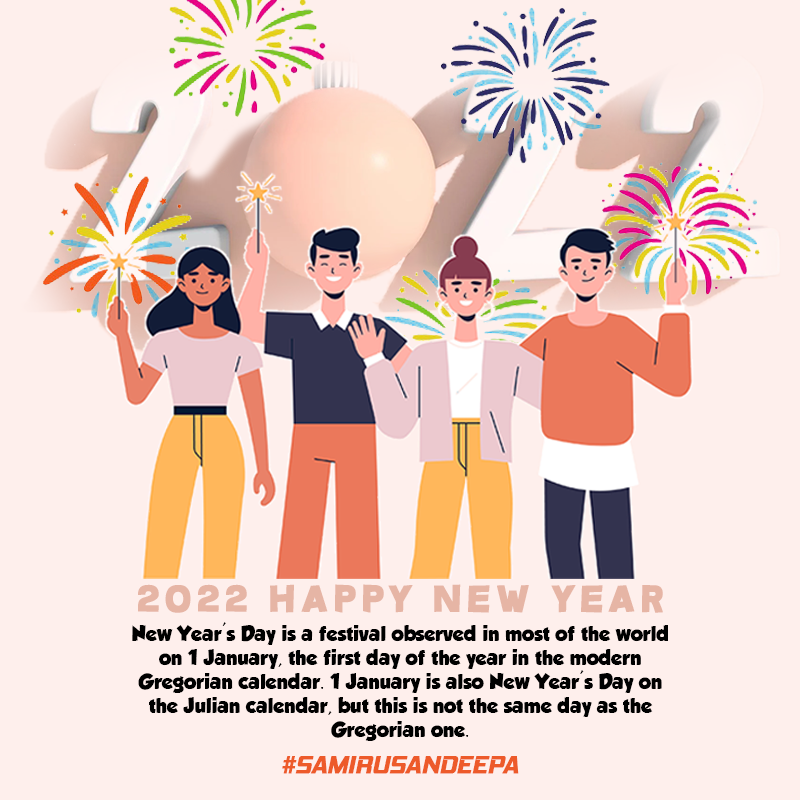
<style>
.page{position:relative;width:800px;height:800px;background:#feefec}
.page>*{position:absolute;margin:0}
.t1{font:36.8px "Questrian";letter-spacing:0.16em;color:#e6b5a5;font-weight:bold}
.t2{font:19.1px/24px "GROBOLD";color:#000000}
.t3{font:24.5px "HemiHeadRg-BoldItalic";color:#ed5a2a;font-weight:bold}
</style>
<div class="page">
<p class="t1" style="left:138px;top:584px;width:525px;height:29px">2022 Happy New Year</p>
<p class="t2" style="left:132px;top:622px;width:536px;height:119px;text-align:center">New Year's Day is a festival observed in most of the world on 1 January, the first day of the year in the modern Gregorian calendar. 1 January is also New Year's Day on the Julian calendar, but this is not the same day as the Gregorian one.</p>
<p class="t3" style="left:282px;top:756px;width:237px;height:18px">#SAMIRUSANDEEPA</p>
</div>
